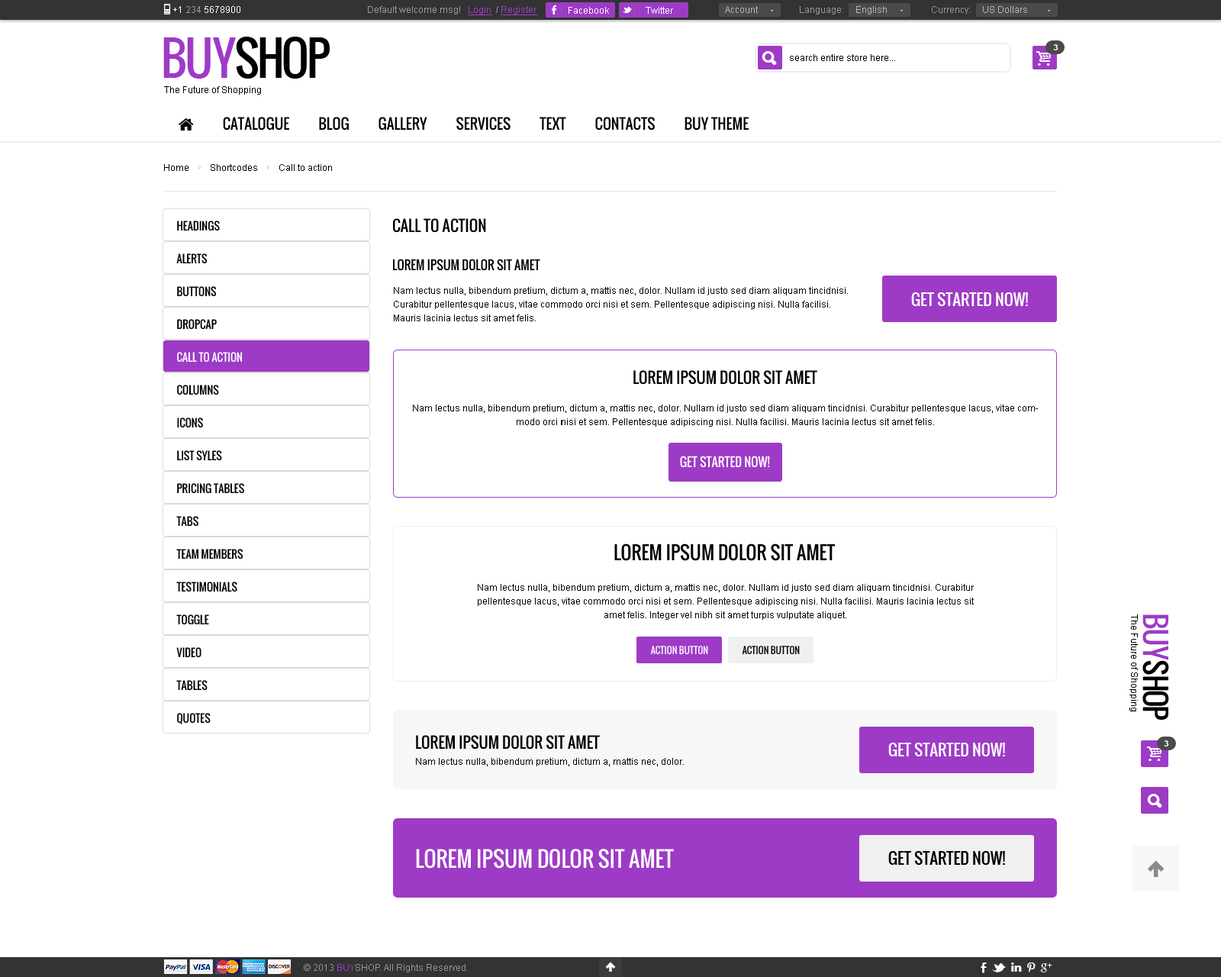
<style>
.page{position:relative;width:1221px;height:977px;background:#ffffff}
.page>*{position:absolute;margin:0}
.t1{font:9.2px "ArialMT";color:#ffffff}
.t2{font:9.2px "ArialMT";color:#9b9b9b}
.t3{font:9.2px "ArialMT";color:#9d3bc6;text-decoration:underline}
.t4{font:9.2px "ArialMT";color:#b6b6b6}
.t5{font:45.8px "Oswald";letter-spacing:-0.06em;color:#000000;text-transform:uppercase}
.t6{font:45.8px "Oswald";letter-spacing:-0.06em;color:#9d3bc6;text-transform:uppercase}
.t7{font:8.4px "Arial-BoldMT";color:#ffffff;text-transform:uppercase}
.t8{font:9.2px "ArialMT";color:#000000}
.t9{font:10.7px/32.8px "Oswald";color:#000000;text-transform:uppercase}
.t10{font:10.7px/32.8px "Oswald";color:#ffffff;text-transform:uppercase}
.t11{font:15.3px "Oswald";color:#000000;text-transform:uppercase}
.t12{font:12.2px "Oswald";color:#000000;text-transform:uppercase}
.t13{font:9.2px/13.7px "ArialMT";color:#000000}
.t14{font:15.9px "Oswald";color:#ffffff;text-transform:uppercase}
.t15{font:12.2px "Oswald";color:#ffffff;text-transform:uppercase}
.t16{font:18.3px "Oswald";color:#000000;text-transform:uppercase}
.t17{font:29px "Oswald";letter-spacing:-0.06em;color:#000000;text-transform:uppercase}
.t18{font:29px "Oswald";letter-spacing:-0.06em;color:#9d3bc6;text-transform:uppercase}
.t19{font:9.2px "Oswald";color:#ffffff;text-transform:uppercase}
.t20{font:9.2px "Oswald";color:#000000;text-transform:uppercase}
.t21{font:21.4px "Oswald";color:#ffffff;text-transform:uppercase}
.t22{font:15.9px "Oswald";color:#000000;text-transform:uppercase}
.t23{font:9.2px "ArialMT";color:#959595}
.t24{font:9.2px "ArialMT";color:#9d3bc6}
</style>
<div class="page">
<p class="t1" style="left:173px;top:6px;width:67px;height:7px">+1 <span class="t2">234 </span>5678900</p>
<p class="t2" style="left:368px;top:6px;width:169px;height:9px">Default welcome msg!   <span class="t3">Login </span> / <span class="t3">Register</span></p>
<p class="t2" style="left:368px;top:6px;width:169px;height:9px">Default welcome msg!   <span class="t3">Login </span> / <span class="t3">Register</span></p>
<p class="t1" style="left:568px;top:7px;width:41px;height:7px">Facebook</p>
<p class="t1" style="left:646px;top:7px;width:27px;height:7px">Twitter</p>
<p class="t4" style="left:725px;top:6px;width:33px;height:7px">Account</p>
<p class="t2" style="left:800px;top:6px;width:87px;height:8px">Language:     <span class="t4">English</span></p>
<p class="t4" style="left:932px;top:6px;width:95px;height:8px"><span class="t2">Currency:     </span>US Dollars</p>
<p class="t5" style="left:163px;top:37px;width:167px;height:42px"><span class="t6">buy</span>shop</p>
<p class="t7" style="left:1053px;top:44px;width:5px;height:6px">3</p>
<p class="t8" style="left:790px;top:54px;width:105px;height:7px">search entire store here...</p>
<p class="t8" style="left:164px;top:86px;width:97px;height:9px">The Future of Shopping</p>
<p class="t8" style="left:164px;top:164px;width:168px;height:7px">Home         Shortcodes         Call to action</p>
<p class="t9" style="left:176px;top:221px;width:68px;height:503px">Headings<br>Alerts<br>Buttons<br>Dropcap<br><span class="t10">Call To Action<br></span>Columns<br>Icons<br>List syles<br>Pricing Tables<br>Tabs<br>Team Members<br>Testimonials<br>Toggle<br>Video<br>Tables<br>Quotes</p>
<p class="t11" style="left:393px;top:218px;width:93px;height:15px">Call TO ACTION</p>
<p class="t12" style="left:393px;top:259px;width:147px;height:12px">Lorem ipsum dolor sit amet</p>
<p class="t13" style="left:394px;top:287px;width:454px;height:34px">Nam lectus nulla, bibendum pretium, dictum a, mattis nec, dolor. Nullam id justo sed diam aliquam tincidnisi. Curabitur pellentesque lacus, vitae commodo orci nisi et sem. Pellentesque adipiscing nisi. Nulla facilisi. Mauris lacinia lectus sit amet felis.</p>
<p class="t14" style="left:911px;top:292px;width:117px;height:14px">GET STARTED NOW!</p>
<p class="t11" style="left:633px;top:370px;width:184px;height:15px">Lorem ipsum dolor sit amet</p>
<p class="t13" style="left:413px;top:404px;width:625px;height:23px;text-align:center">Nam lectus nulla, bibendum pretium, dictum a, mattis nec, dolor. Nullam id justo sed diam aliquam tincidnisi. Curabitur pellentesque lacus, vitae commodo orci nisi et sem. Pellentesque adipiscing nisi. Nulla facilisi. Mauris lacinia lectus sit amet felis.</p>
<p class="t15" style="left:680px;top:456px;width:90px;height:12px">GET STARTED NOW!</p>
<p class="t16" style="left:614px;top:543px;width:221px;height:18px">Lorem ipsum dolor sit amet</p>
<p class="t13" style="left:478px;top:584px;width:496px;height:36px;text-align:center">Nam lectus nulla, bibendum pretium, dictum a, mattis nec, dolor. Nullam id justo sed diam aliquam tincidnisi. Curabitur pellentesque lacus, vitae commodo orci nisi et sem. Pellentesque adipiscing nisi. Nulla facilisi. Mauris lacinia lectus sit amet felis. Integer vel nibh sit amet turpis vulputate aliquet.</p>
<p class="t8" style="left:1129px;top:614px;width:9px;height:97px;rotate:90deg">The Future of Shopping</p>
<p class="t17" style="left:1142px;top:614px;width:27px;height:106px;rotate:90deg"><span class="t18">buy</span>shop</p>
<p class="t19" style="left:650px;top:646px;width:58px;height:8px">Action Button</p>
<p class="t20" style="left:742px;top:646px;width:58px;height:8px">Action Button</p>
<p class="t11" style="left:416px;top:735px;width:184px;height:14px">Lorem ipsum dolor sit amet</p>
<p class="t14" style="left:888px;top:742px;width:117px;height:14px">GET STARTED NOW!</p>
<p class="t7" style="left:1164px;top:740px;width:5px;height:6px">3</p>
<p class="t8" style="left:416px;top:758px;width:268px;height:8px">Nam lectus nulla, bibendum pretium, dictum a, mattis nec, dolor.</p>
<p class="t21" style="left:416px;top:849px;width:258px;height:19px">Lorem ipsum dolor sit amet</p>
<p class="t22" style="left:888px;top:851px;width:117px;height:14px">GET STARTED NOW!</p>
<p class="t23" style="left:304px;top:964px;width:164px;height:8px">© 2013 <span class="t24">BUY</span>SHOP. All Rights Reserved.</p>
</div>
